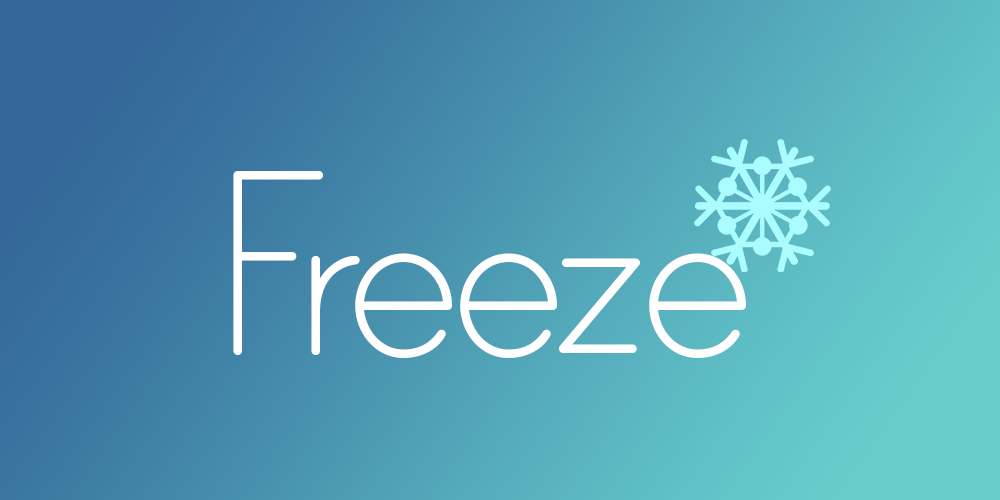
<style>
.page{position:relative;width:1000px;height:500px}
.page>*{position:absolute;margin:0}
.t1{font:300px "PrintClearly";letter-spacing:-0.1em;color:#ffffff}
</style>
<div class="page">
<p class="t1" style="left:233px;top:171px;width:513px;height:187px">Freeze</p>
</div>
